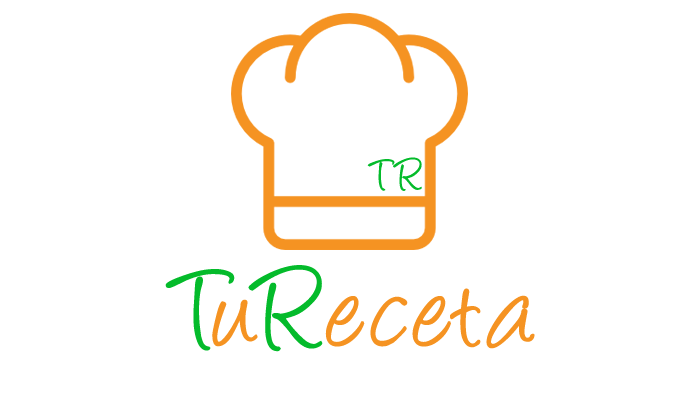
<style>
.page{position:relative;width:700px;height:400px;background:#ffffff}
.page>*{position:absolute;margin:0}
.t1{font:48.4px "Angelina";color:#04bb2b}
.t2{font:125px "Angelina";color:#f59322}
.t3{font:125px "Angelina";color:#04bb2b}
</style>
<div class="page">
<p class="t1" style="left:367px;top:157px;width:55px;height:34px">TR</p>
<p class="t2" style="left:165px;top:265px;width:370px;height:87px"><span class="t3">T</span>u<span class="t3">R</span>eceta</p>
</div>
